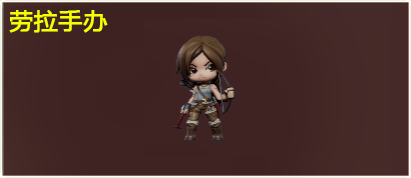
<style>
.page{position:relative;width:411px;height:178px}
.page>*{position:absolute;margin:0}
.t1{font:24px "MicrosoftYaHeiUI";color:#f4ff00;font-weight:bold}
</style>
<div class="page">
<p class="t1" style="left:9px;top:10px;width:99px;height:23px">劳拉手办</p>
</div>
